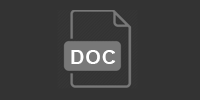
<style>
.page{position:relative;width:200px;height:100px;background:#333333}
.page>*{position:absolute;margin:0}
.t1{font:19.4px "Arial-BoldMT";letter-spacing:0.04em;color:#ffffff;scale:1.03 1}
</style>
<div class="page">
<p class="t1" style="left:71px;top:50px;width:45px;height:14px">DOC</p>
</div>
